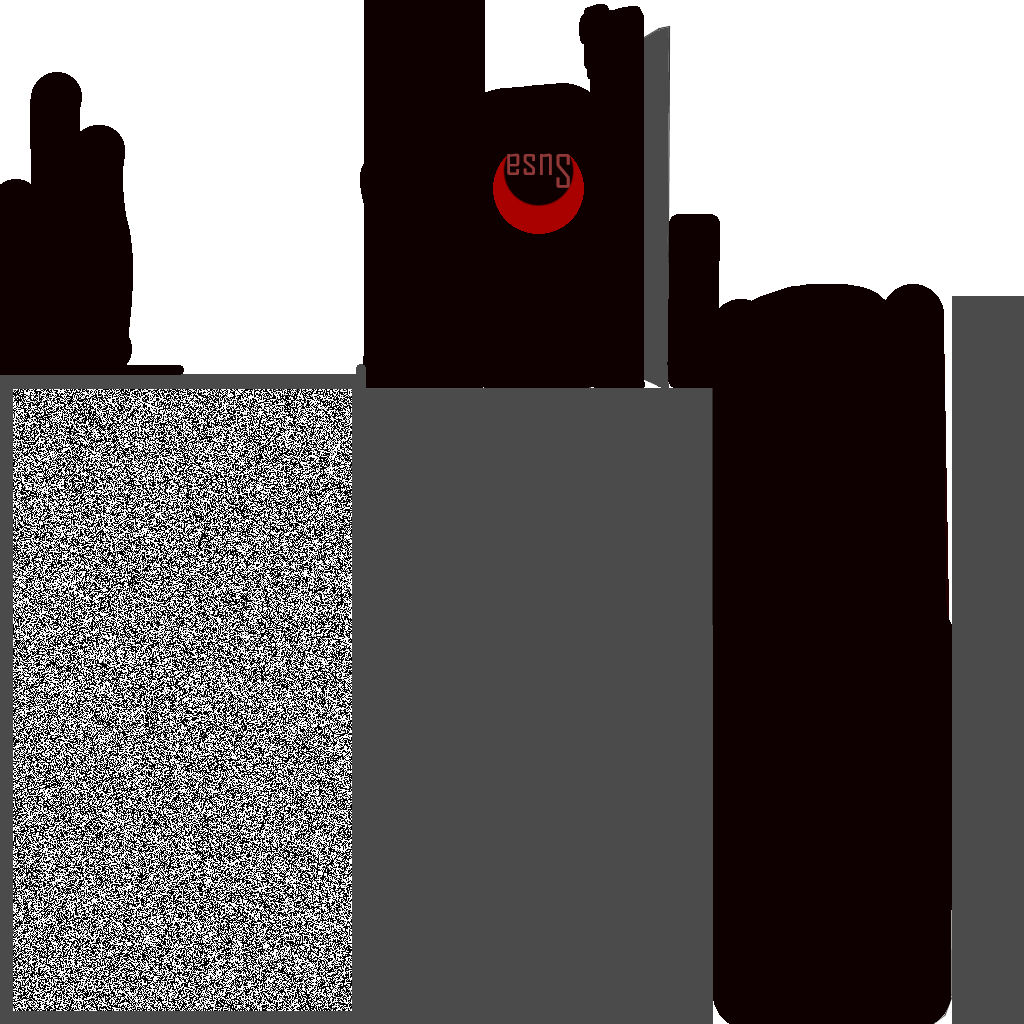
<style>
.page{position:relative;width:1024px;height:1024px;background:#4b4b4b}
.page>*{position:absolute;margin:0}
.t1{font:44px "AgencyFB-Reg";color:#8f3838}
</style>
<div class="page">
<p class="t1" style="left:507px;top:153px;width:63px;height:35px;rotate:180deg">Susa</p>
</div>
